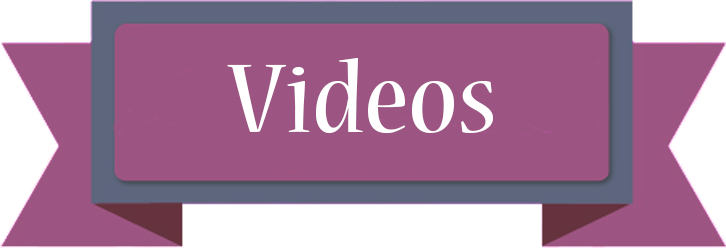
<style>
.page{position:relative;width:726px;height:248px;background:#9c5582}
.page>*{position:absolute;margin:0}
.t1{font:109px "NuevaStd-Cond";color:#ffffff;scale:1.26 1}
</style>
<div class="page">
<p class="t1" style="left:227px;top:58px;width:266px;height:76px">Videos</p>
</div>
